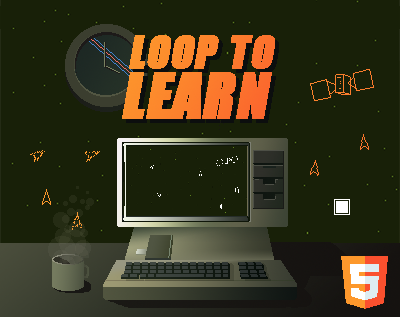
<style>
.page{position:relative;width:400px;height:317px;background:#182008}
.page>*{position:absolute;margin:0}
.t1{font:41.7px/50.1px "Impact";color:#fc812d;font-weight:bold;font-style:italic}
.t2{font:58.4px/50.1px "Impact";color:#fc812d;font-weight:bold;font-style:italic}
</style>
<div class="page">
<p class="t1" style="left:122px;top:35px;width:153px;height:84px;text-align:center">LOOP TO<br><span class="t2">LEARN</span></p>
</div>
